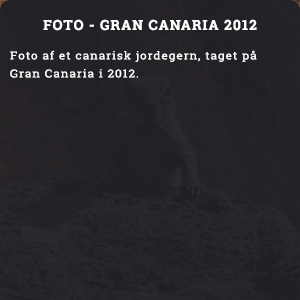
<style>
.page{position:relative;width:300px;height:300px}
.page>*{position:absolute;margin:0}
.t1{font:14px "RobotoSlab-Bold";letter-spacing:0.075em;color:#ffffff}
.t2{font:11.1px/18px "RobotoSlab-Regular";letter-spacing:0.075em;color:#ffffff;scale:1.08 1}
</style>
<div class="page">
<p class="t1" style="left:43px;top:19px;width:214px;height:12px">FOTO - GRAN CANARIA 2012</p>
<p class="t2" style="left:10px;top:50px;width:247px;height:28px">Foto af et canarisk jordegern, taget på Gran Canaria i 2012.</p>
</div>
